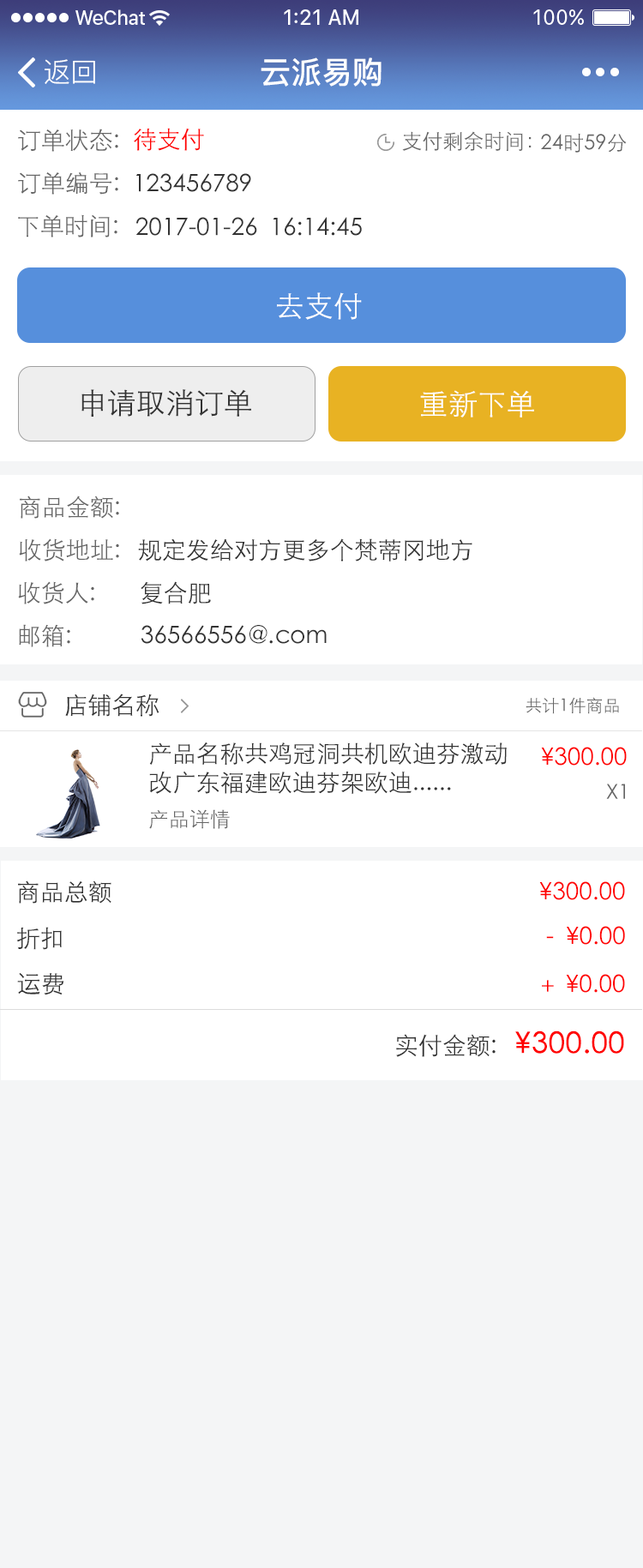
<style>
.page{position:relative;width:643px;height:1568px;background:#ffffff}
.page>*{position:absolute;margin:0}
.t1{font:27.4px "PingFang-SC-Regular";color:#ffffff}
.t2{font:30.9px "PingFang-SC-Bold";color:#ffffff}
.t3{font:24px "STXihei";color:#666666}
.t4{font:24px "STXihei";color:#ff0101}
.t5{font:20.6px "STXihei";color:#666666}
.t6{font:24px "STXihei";color:#333333}
.t7{font:29.1px "STXihei";color:#ffffff}
.t8{font:29.1px "STXihei";color:#333333}
.t9{font:17.1px "STXihei";color:#666666}
.t10{font:24px "STXihei";color:#ff0000}
.t11{font:29.1px "STXihei";color:#ff0000;font-weight:bold}
</style>
<div class="page">
<p class="t1" style="left:45px;top:59px;width:50px;height:25px">返回</p>
<p class="t2" style="left:261px;top:57px;width:120px;height:30px">云派易购</p>
<p class="t3" style="left:18px;top:129px;width:100px;height:23px">订单状态:</p>
<p class="t4" style="left:134px;top:128px;width:70px;height:23px">待支付</p>
<p class="t5" style="left:402px;top:131px;width:130px;height:20px">支付剩余时间：</p>
<p class="t5" style="left:541px;top:133px;width:86px;height:20px">24时59分</p>
<p class="t3" style="left:18px;top:172px;width:100px;height:23px">订单编号:</p>
<p class="t6" style="left:136px;top:173px;width:115px;height:19px">123456789</p>
<p class="t3" style="left:18px;top:214px;width:99px;height:23px">下单时间:</p>
<p class="t6" style="left:135px;top:217px;width:227px;height:19px">2017-01-26  16:14:45</p>
<p class="t7" style="left:277px;top:292px;width:85px;height:28px">去支付</p>
<p class="t8" style="left:81px;top:389px;width:170px;height:28px">申请取消订单</p>
<p class="t7" style="left:420px;top:390px;width:114px;height:28px">重新下单</p>
<p class="t3" style="left:20px;top:496px;width:99px;height:23px">商品金额:</p>
<p class="t3" style="left:19px;top:538px;width:100px;height:24px">收货地址:</p>
<p class="t6" style="left:138px;top:538px;width:334px;height:24px">规定发给对方更多个梵蒂冈地方</p>
<p class="t3" style="left:18px;top:581px;width:76px;height:23px">收货人:</p>
<p class="t6" style="left:141px;top:581px;width:70px;height:23px">复合肥</p>
<p class="t3" style="left:19px;top:624px;width:51px;height:23px">邮箱:</p>
<p class="t6" style="left:141px;top:625px;width:186px;height:19px">36566556@.com</p>
<p class="t6" style="left:65px;top:694px;width:94px;height:23px">店铺名称</p>
<p class="t9" style="left:526px;top:697px;width:93px;height:17px">共计1件商品</p>
<p class="t6" style="left:149px;top:742px;width:358px;height:52px">产品名称共鸡冠洞共机欧迪芬激动改广东福建欧迪芬架欧迪......</p>
<p class="t10" style="left:541px;top:747px;width:86px;height:19px">¥300.00</p>
<p class="t5" style="left:606px;top:784px;width:19px;height:15px">X1</p>
<p class="t5" style="left:149px;top:809px;width:81px;height:20px">产品详情</p>
<p class="t6" style="left:18px;top:880px;width:93px;height:24px">商品总额</p>
<p class="t10" style="left:539px;top:881px;width:86px;height:19px">¥300.00</p>
<p class="t6" style="left:16px;top:927px;width:46px;height:23px">折扣</p>
<p class="t10" style="left:546px;top:926px;width:79px;height:19px">-  ¥0.00</p>
<p class="t6" style="left:17px;top:973px;width:47px;height:22px">运费</p>
<p class="t10" style="left:542px;top:974px;width:83px;height:19px">＋ ¥0.00</p>
<p class="t11" style="left:396px;top:1030px;width:228px;height:27px"><span class="t6">实付金额:   </span>¥300.00</p>
</div>
